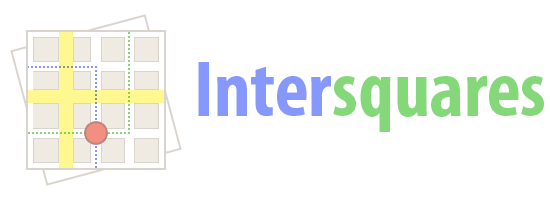
<style>
.page{position:relative;width:550px;height:200px;background:#ffffff}
.page>*{position:absolute;margin:0}
.t1{font:80px "MyriadPro-BoldCond";color:#84d87a}
.t2{font:80px "MyriadPro-BoldCond";color:#8798fc}
</style>
<div class="page">
<p class="t1" style="left:198px;top:62px;width:346px;height:70px"><span class="t2">Inter</span>squares</p>
</div>
